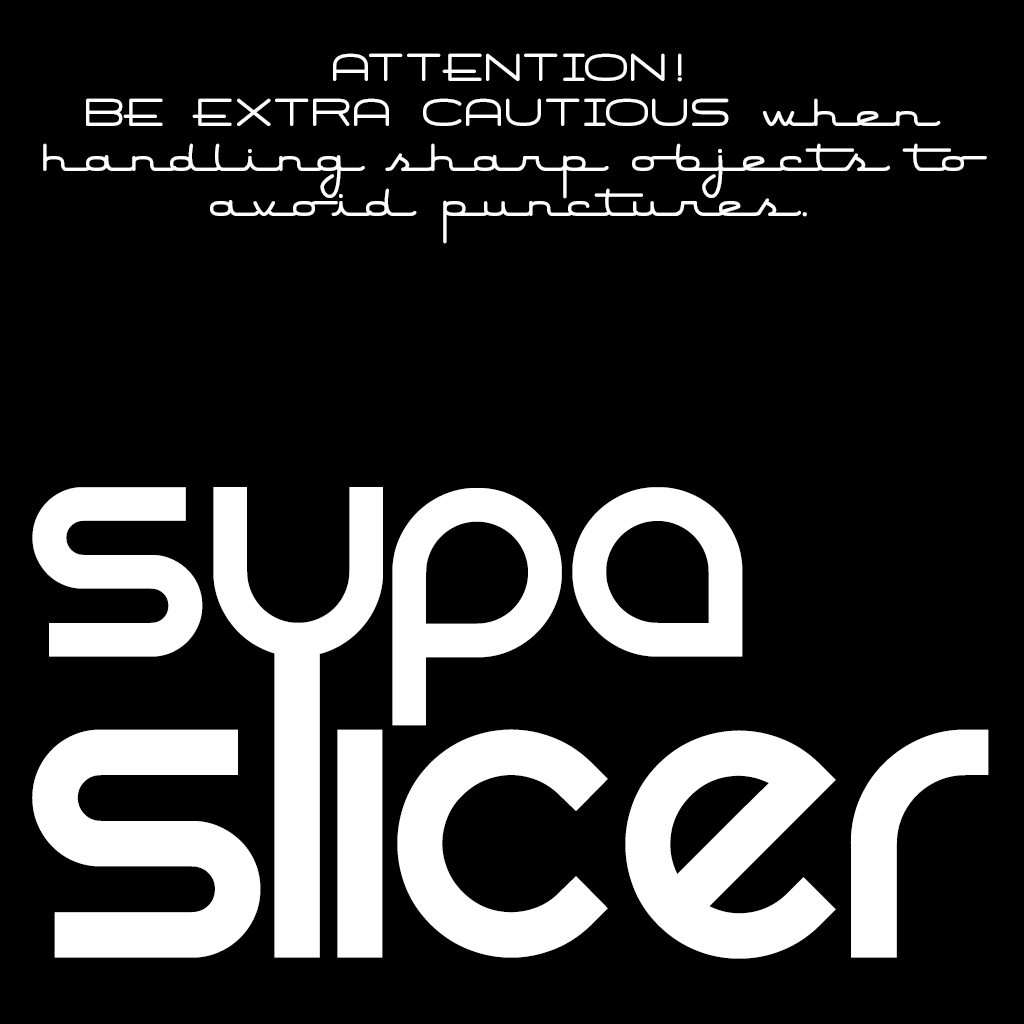
<style>
.page{position:relative;width:1024px;height:1024px;background:#000000}
.page>*{position:absolute;margin:0}
.t1{font:48px/45px "AirConditioner";color:#ffffff}
.t2{font:507.2px/300.8px "REZ";color:#ffffff}
.t3{font:377.6px/251.7px "REZ";color:#ffffff}
</style>
<div class="page">
<p class="t1" style="left:43px;top:53px;width:944px;height:191px;text-align:center">ATTENTION! <br>BE EXTRA CAUTIOUS when handling sharp objects to avoid punctures.</p>
<p class="t2" style="left:32px;top:487px;width:957px;height:472px"><span class="t3">Supa<br></span>Slicer</p>
</div>
